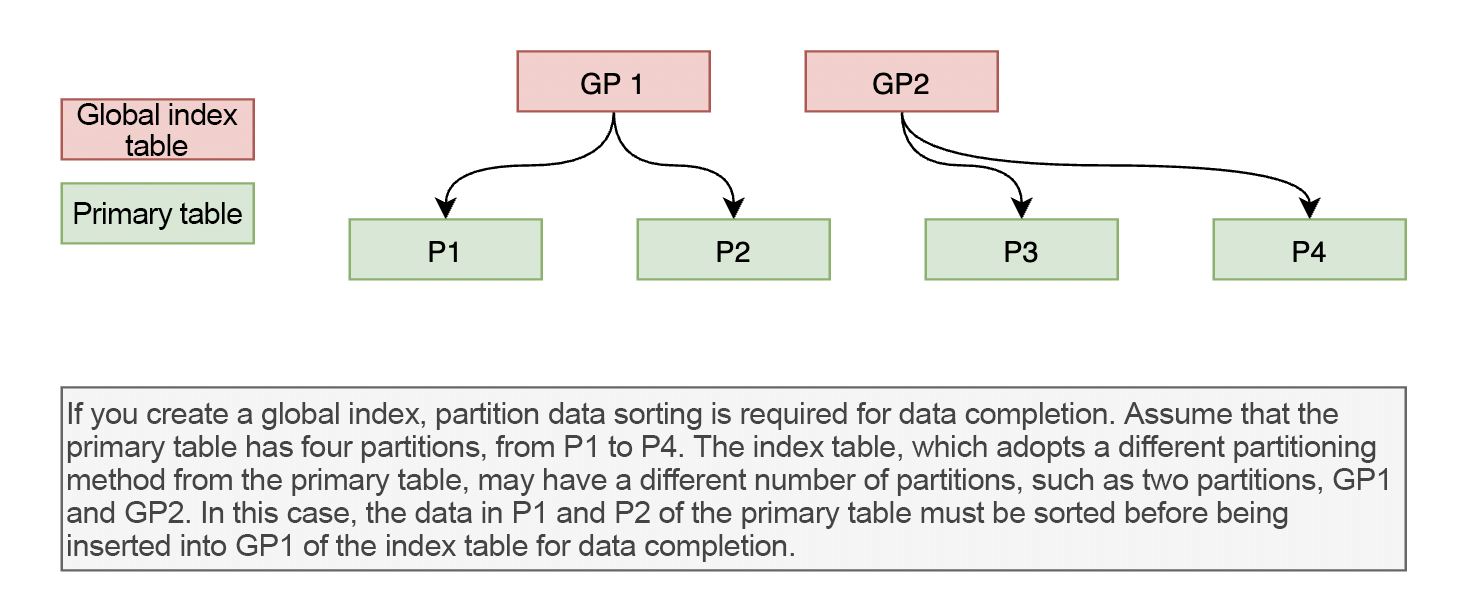
<style>
.page{position:relative;width:1478px;height:599px;background:#ffffff}
.page>*{position:absolute;margin:0}
.t1{font:31px/31px "ArialMT";letter-spacing:-0.03em;color:#000000}
.t2{font:31px "ArialMT";letter-spacing:-0.03em;color:#000000}
.t3{font:31px/33px "ArialMT";letter-spacing:-0.02em;color:#444444}
</style>
<div class="page">
<p class="t1" style="left:77px;top:103px;width:161px;height:53px;text-align:center">Global index table</p>
<p class="t2" style="left:74px;top:202px;width:168px;height:28px">Primary table</p>
<p class="t3" style="left:67px;top:402px;width:1320px;height:160px">If you create a global index, partition data sorting is required for data completion. Assume that the primary table has four partitions, from P1 to P4. The index table, which adopts a different partitioning method from the primary table, may have a different number of partitions, such as two partitions, GP1 and GP2. In this case, the data in P1 and P2 of the primary table must be sorted before being inserted into GP1 of the index table for data completion.</p>
</div>
